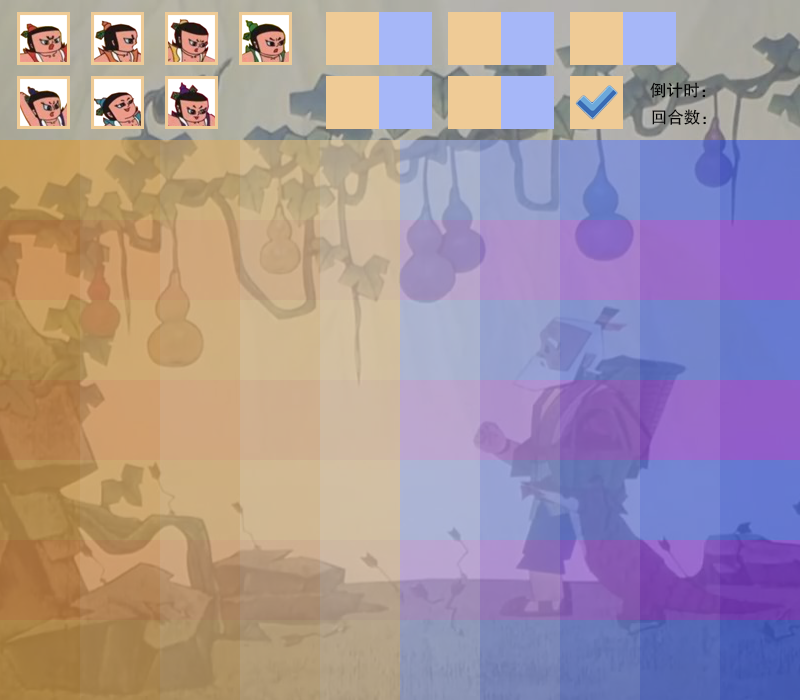
<style>
.page{position:relative;width:800px;height:700px}
.page>*{position:absolute;margin:0}
.t1{font:16.7px "FZHTJW--GB1-0";color:#060606}
</style>
<div class="page">
<p class="t1" style="left:650px;top:82px;width:56px;height:16px">倒计时：</p>
<p class="t1" style="left:652px;top:109px;width:54px;height:16px">回合数：</p>
</div>
